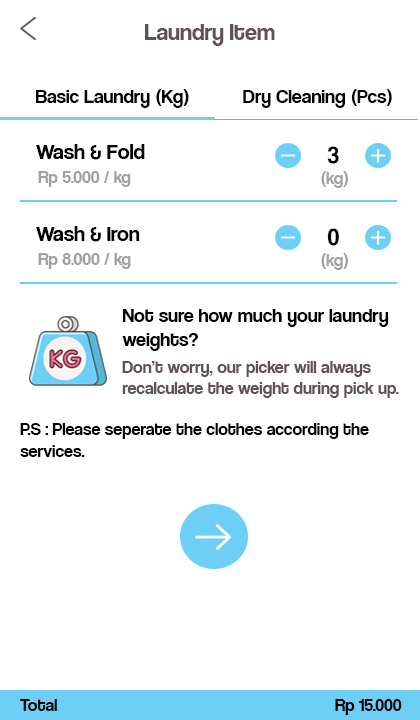
<style>
.page{position:relative;width:420px;height:720px;background:#ffffff}
.page>*{position:absolute;margin:0}
.t1{font:24px "CoolveticaRg-Regular";color:#605252}
.t2{font:20px "CoolveticaRg-Regular";color:#000000}
.t3{font:22px "CoolveticaRg-Regular";color:#000000}
.t4{font:24px "CoolveticaRg-Regular";color:#000000}
.t5{font:18px "CoolveticaRg-Regular";color:#a1a1a1}
.t6{font:18px "CoolveticaRg-Regular";color:#605252}
.t7{font:18px "CoolveticaRg-Regular";color:#000000}
</style>
<div class="page">
<p class="t1" style="left:145px;top:24px;width:130px;height:22px">Laundry Item</p>
<p class="t2" style="left:36px;top:89px;width:153px;height:19px">Basic Laundry (Kg)</p>
<p class="t2" style="left:243px;top:89px;width:149px;height:19px">Dry Cleaning (Pcs)</p>
<p class="t3" style="left:36px;top:144px;width:109px;height:16px">Wash &amp; Fold</p>
<p class="t4" style="left:327px;top:146px;width:12px;height:18px">3</p>
<p class="t5" style="left:38px;top:171px;width:93px;height:16px">Rp 5.000 / kg</p>
<p class="t5" style="left:321px;top:171px;width:27px;height:17px">(kg)</p>
<p class="t3" style="left:36px;top:226px;width:104px;height:16px">Wash &amp; Iron</p>
<p class="t4" style="left:327px;top:228px;width:12px;height:18px">0</p>
<p class="t5" style="left:38px;top:253px;width:93px;height:16px">Rp 8.000 / kg</p>
<p class="t5" style="left:321px;top:253px;width:27px;height:17px">(kg)</p>
<p class="t2" style="left:122px;top:309px;width:267px;height:42px">Not sure how much your laundry <br>weights?</p>
<p class="t6" style="left:122px;top:361px;width:277px;height:37px">Don’t worry, our picker will always <br>recalculate the weight during pick up.</p>
<p class="t7" style="left:20px;top:423px;width:349px;height:34px">P.S : Please seperate the clothes according the <br>services.</p>
<p class="t7" style="left:20px;top:699px;width:37px;height:12px">Total</p>
<p class="t7" style="left:335px;top:699px;width:67px;height:16px">Rp 15.000</p>
</div>
